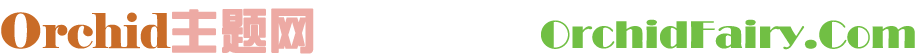
<style>
.page{position:relative;width:920px;height:55px;background:#ffffff}
.page>*{position:absolute;margin:0}
.t1{font:40px "Broadway";color:#71bf44}
.t2{font:48px "Elephant-Regular";color:#c96c27}
.t3{font:48px "FZZYJW--GB1-0";color:#edaaa4;font-weight:bold}
</style>
<div class="page">
<p class="t1" style="left:1px;top:8px;width:914px;height:46px"><span class="t2">Orchid</span><span class="t3">主题网           </span>OrchidFairy.Com</p>
</div>
